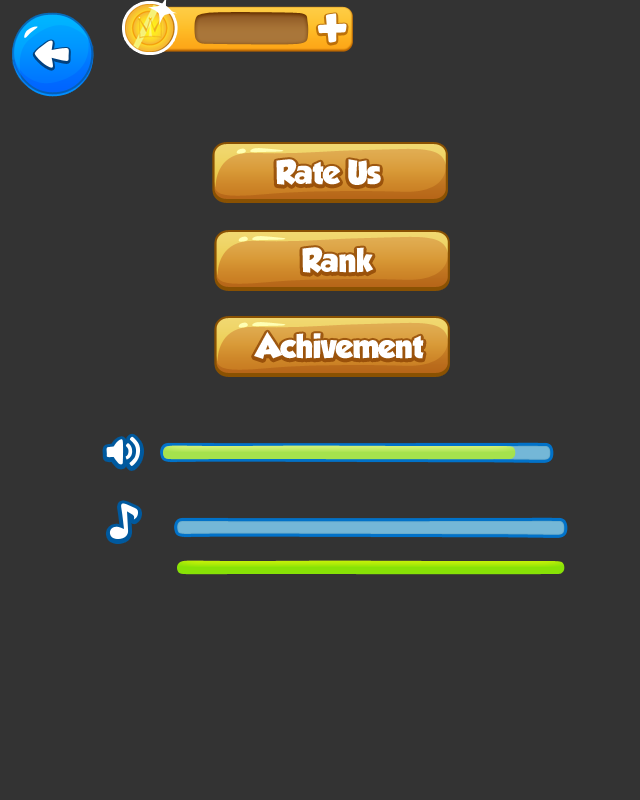
<style>
.page{position:relative;width:640px;height:800px;background:#333333}
.page>*{position:absolute;margin:0}
.t1{font:30px "GROBOLD";letter-spacing:-0.02em;color:#ffffff}
</style>
<div class="page">
<p class="t1" style="left:276px;top:159px;width:105px;height:26px">Rate Us</p>
<p class="t1" style="left:302px;top:247px;width:72px;height:26px">Rank</p>
<p class="t1" style="left:254px;top:331px;width:170px;height:28px">Achivement</p>
</div>
